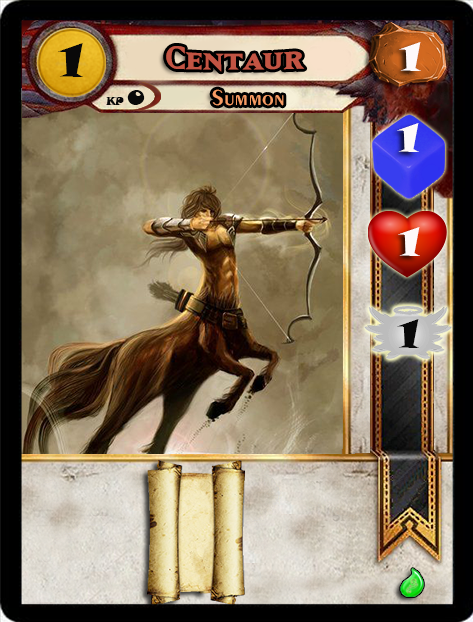
<style>
.page{position:relative;width:473px;height:622px}
.page>*{position:absolute;margin:0}
.t1{font:46.6px "SnapITC-Regular";color:#090909;scale:1.05 1}
.t2{font:40px "MatrixBoldSmallCaps";color:#c25443;scale:1.06 1}
.t3{font:40px "SnapITC-Regular";color:#fef9f9;scale:1.05 1}
.t4{font:22.7px "Exotic350BT-DemiBold";color:#f89c64;scale:1.06 1}
.t5{font:20.5px "SnapITC-Regular";color:#090909}
.t6{font:40px "SnapITC-Regular";color:#090909;scale:1.05 1}
</style>
<div class="page">
<p class="t1" style="left:58px;top:43px;width:25px;height:34px">1</p>
<p class="t2" style="left:166px;top:46px;width:139px;height:26px">Centaur</p>
<p class="t3" style="left:399px;top:42px;width:22px;height:29px">1</p>
<p class="t4" style="left:212px;top:89px;width:72px;height:17px">Summon</p>
<p class="t5" style="left:127px;top:90px;width:18px;height:15px">0</p>
<p class="t3" style="left:397px;top:123px;width:22px;height:29px">1</p>
<p class="t3" style="left:398px;top:227px;width:22px;height:29px">1</p>
<p class="t6" style="left:397px;top:319px;width:22px;height:29px">1</p>
</div>
